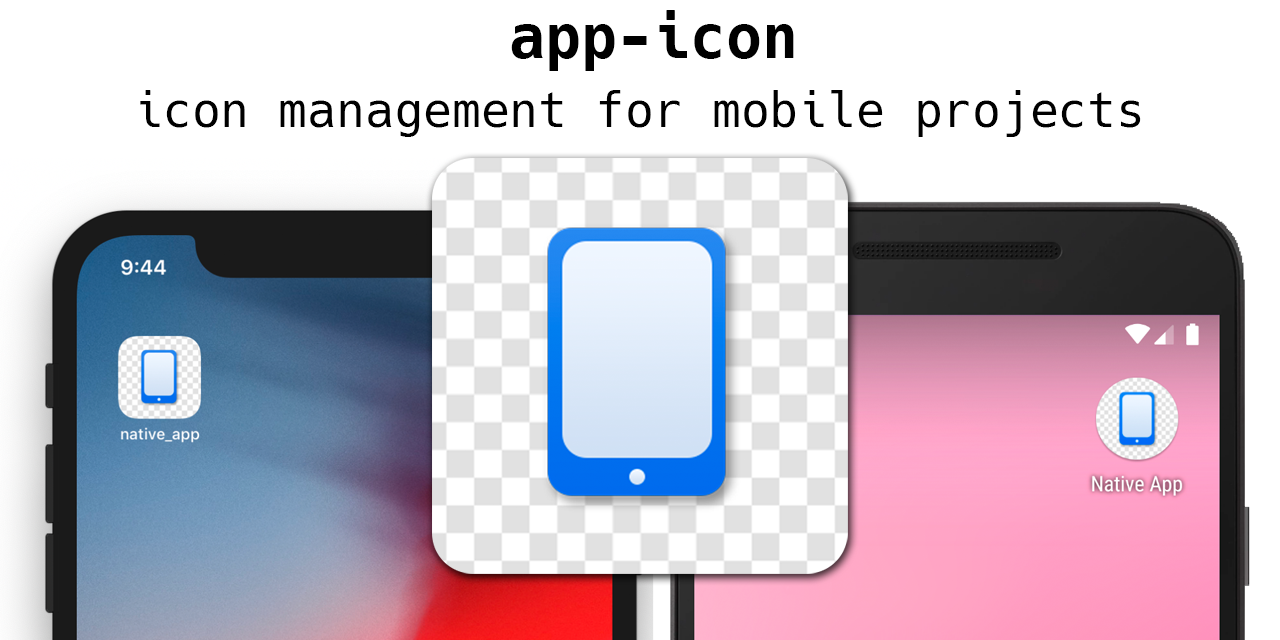
<style>
.page{position:relative;width:1280px;height:640px;background:#ffffff}
.page>*{position:absolute;margin:0}
.t1{font:60px "Hack-Bold";color:#000000}
.t2{font:48px "Hack-Regular";color:#000000}
</style>
<div class="page">
<p class="t1" style="left:511px;top:10px;width:283px;height:61px">app-icon</p>
<p class="t2" style="left:140px;top:90px;width:1001px;height:47px">icon management for mobile projects</p>
</div>
